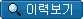
<style>
.page{position:relative;width:83px;height:19px;background:#0f679e}
.page>*{position:absolute;margin:0}
.t1{font:12px "Gulim";color:#ffffff}
</style>
<div class="page">
<p class="t1" style="left:27px;top:4px;width:45px;height:11px">이력보기</p>
</div>
